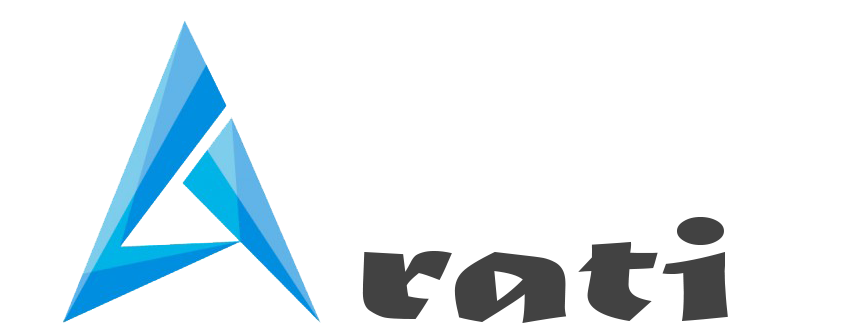
<style>
.page{position:relative;width:864px;height:336px;background:#ffffff}
.page>*{position:absolute;margin:0}
.t1{font:157.9px "MaturaMTScriptCapitals";color:#424242;scale:1.66 1}
</style>
<div class="page">
<p class="t1" style="left:362px;top:217px;width:366px;height:106px">rati</p>
</div>
